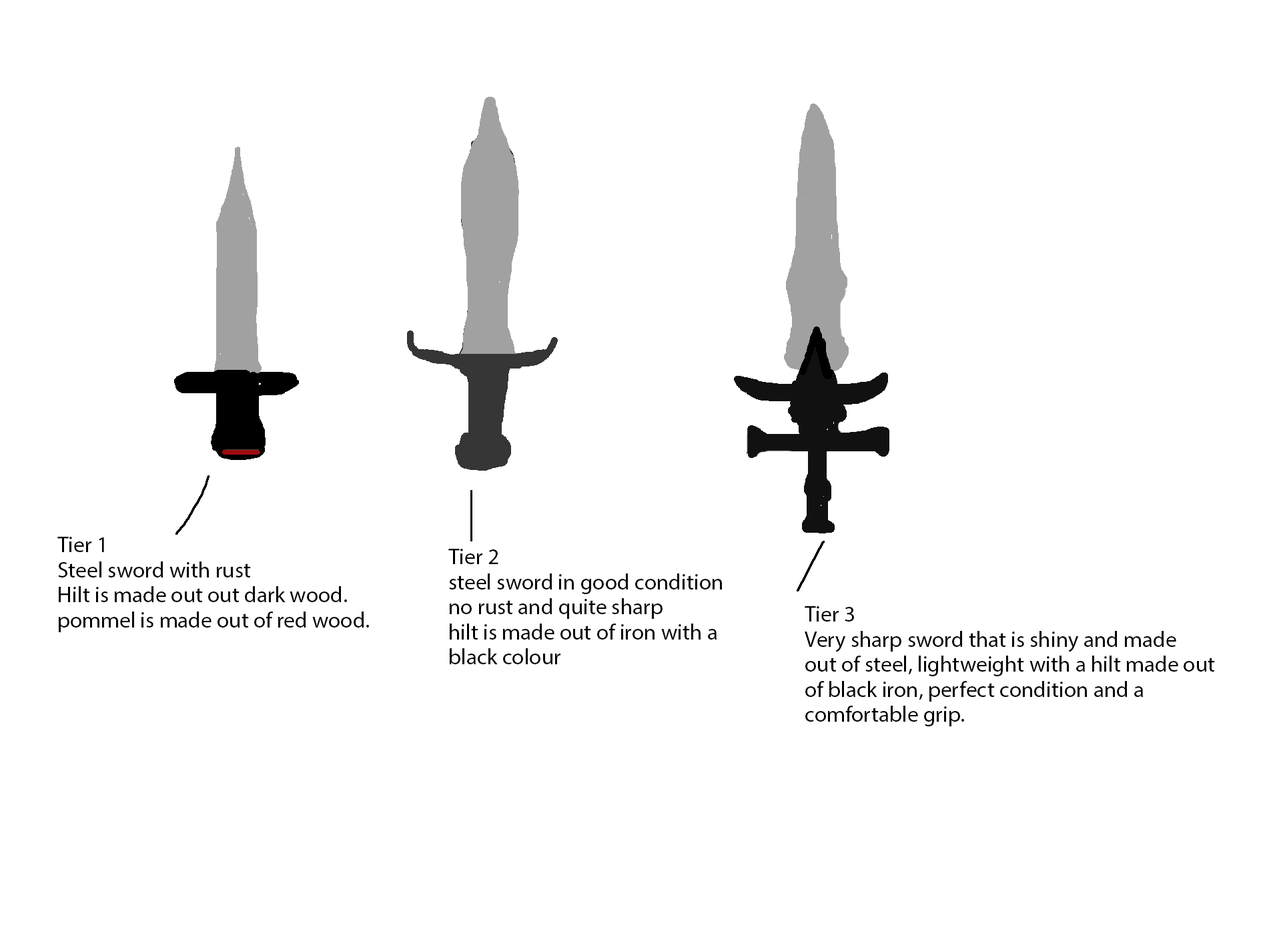
<style>
.page{position:relative;width:1261px;height:946px;background:#ffffff}
.page>*{position:absolute;margin:0}
.t1{font:22.2px/25px "MyriadPro-Regular";color:#000000}
</style>
<div class="page">
<p class="t1" style="left:57px;top:536px;width:312px;height:96px">Tier 1<br>Steel sword with rust<br>Hilt is made out out dark wood.<br>pommel is made out of red wood.</p>
<p class="t1" style="left:448px;top:548px;width:274px;height:116px">Tier 2<br>steel sword in good condition<br>no rust and quite sharp<br>hilt is made out of iron with a <br>black colour</p>
<p class="t1" style="left:805px;top:606px;width:410px;height:120px">Tier 3<br>Very sharp sword that is shiny and made <br>out of steel, lightweight with a hilt made out <br>of black iron, perfect condition and a <br>comfortable grip.</p>
</div>
